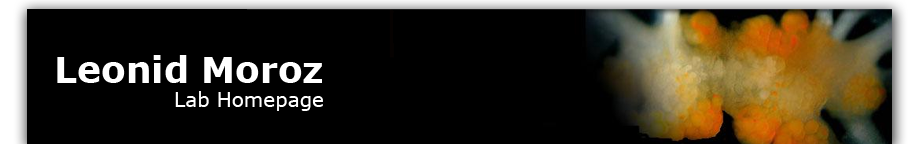
<style>
.page{position:relative;width:918px;height:144px;background:#000000}
.page>*{position:absolute;margin:0}
.t1{font:36px "Verdana-Bold";color:#ffffff}
.t2{font:20px "Verdana";color:#ffffff}
</style>
<div class="page">
<p class="t1" style="left:57px;top:55px;width:265px;height:28px">Leonid Moroz</p>
<p class="t2" style="left:175px;top:91px;width:148px;height:20px">Lab Homepage</p>
</div>
